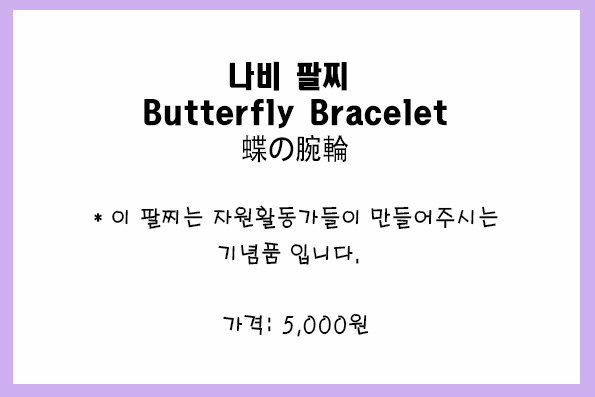
<style>
.page{position:relative;width:595px;height:397px;background:#fffefe}
.page>*{position:absolute;margin:0}
.t1{font:30px/36px "HeadlineR-HM";color:#010101;scale:0.9 1}
.t2{font:30px/36px "AdobeHeitiStd-Regular";color:#010101;scale:0.9 1}
.t3{font:24px/36px "H2porM";color:#040404;scale:0.9 1}
.t4{font:24px "H2porM";color:#040404;scale:0.9 1}
</style>
<div class="page">
<p class="t1" style="left:144px;top:61px;width:303px;height:102px;text-align:center">나비 팔찌 <br>Butterfly Bracelet<br><span class="t2">蝶の腕輪</span></p>
<p class="t3" style="left:94px;top:205px;width:404px;height:60px;text-align:center">* 이 팔찌는 자원활동가들이 만들어주시는<br>기념품 입니다.</p>
<p class="t4" style="left:223px;top:313px;width:146px;height:24px">가격: 5,000원</p>
</div>
